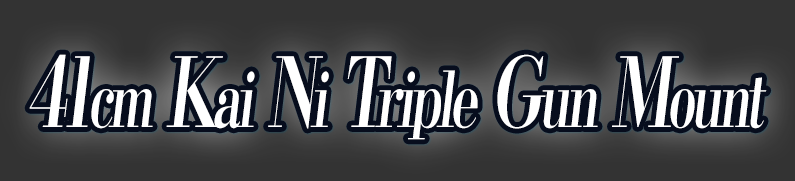
<style>
.page{position:relative;width:795px;height:181px;background:#333333}
.page>*{position:absolute;margin:0}
.t1{font:76.8px "KochoStd-Heavy";letter-spacing:-0.08em;color:#ffffff;font-style:italic;scale:0.68 1}
.t2{font:96px "KochoStd-Heavy";letter-spacing:-0.08em;color:#ffffff;font-style:italic;scale:0.68 1}
</style>
<div class="page">
<p class="t1" style="left:29px;top:54px;width:738px;height:86px"><span class="t2">41</span>cm<span class="t2"> K</span>ai<span class="t2"> N</span>i<span class="t2"> T</span>riple<span class="t2"> G</span>un<span class="t2"> M</span>ount</p>
</div>
